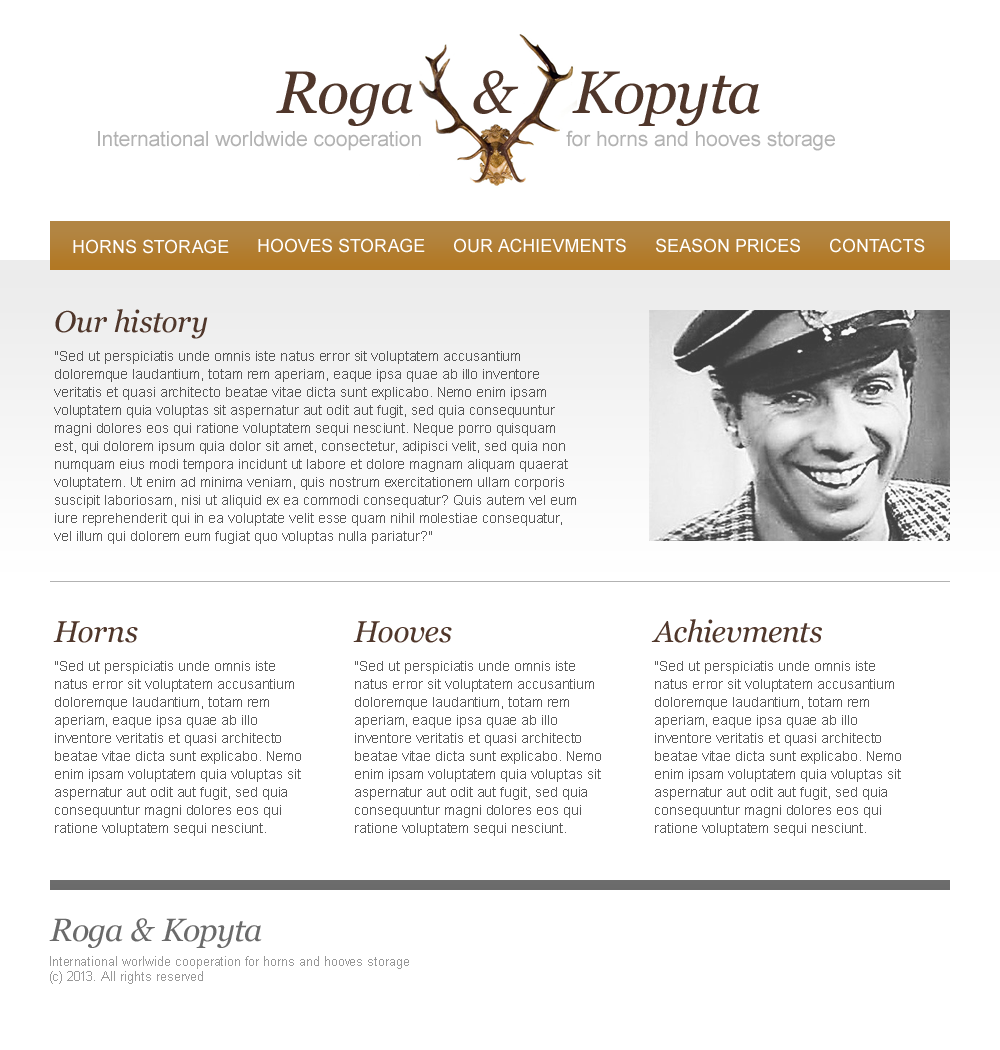
<style>
.page{position:relative;width:1000px;height:1050px;background:#ffffff}
.page>*{position:absolute;margin:0}
.t1{font:60px "Georgia-Italic";color:#50372b}
.t2{font:21px "ArialMT";color:#b2b2b2}
.t3{font:18px "ArialMT";color:#ffffff}
.t4{font:30px "Georgia-Italic";color:#50372b}
.t5{font:14px/18px "ArialMT";color:#565656}
.t6{font:14px/18px "ArialMT";color:#595959}
.t7{font:32px "Georgia-Italic";color:#6a6a6a}
.t8{font:13px/15px "ArialMT";color:#989898}
</style>
<div class="page">
<p class="t1" style="left:276px;top:70px;width:484px;height:56px">Roga    &amp;    Kopyta</p>
<p class="t2" style="left:98px;top:131px;width:323px;height:20px">International worldwide cooperation</p>
<p class="t2" style="left:566px;top:130px;width:269px;height:21px">for horns and hooves storage</p>
<p class="t3" style="left:73px;top:239px;width:156px;height:15px">HORNS STORAGE</p>
<p class="t3" style="left:258px;top:238px;width:167px;height:15px">HOOVES STORAGE</p>
<p class="t3" style="left:454px;top:238px;width:172px;height:15px">OUR ACHIEVMENTS</p>
<p class="t3" style="left:656px;top:238px;width:144px;height:15px">SEASON PRICES</p>
<p class="t3" style="left:830px;top:238px;width:95px;height:15px">CONTACTS</p>
<p class="t4" style="left:55px;top:309px;width:153px;height:30px">Our history</p>
<p class="t5" style="left:54px;top:351px;width:522px;height:193px">"Sed ut perspiciatis unde omnis iste natus error sit voluptatem accusantium <br>doloremque laudantium, totam rem aperiam, eaque ipsa quae ab illo inventore <br>veritatis et quasi architecto beatae vitae dicta sunt explicabo. Nemo enim ipsam <br>voluptatem quia voluptas sit aspernatur aut odit aut fugit, sed quia consequuntur <br>magni dolores eos qui ratione voluptatem sequi nesciunt. Neque porro quisquam <br>est, qui dolorem ipsum quia dolor sit amet, consectetur, adipisci velit, sed quia non <br>numquam eius modi tempora incidunt ut labore et dolore magnam aliquam quaerat <br>voluptatem. Ut enim ad minima veniam, quis nostrum exercitationem ullam corporis <br>suscipit laboriosam, nisi ut aliquid ex ea commodi consequatur? Quis autem vel eum<br>iure reprehenderit qui in ea voluptate velit esse quam nihil molestiae consequatur, <br>vel illum qui dolorem eum fugiat quo voluptas nulla pariatur?"</p>
<p class="t4" style="left:53px;top:621px;width:85px;height:22px">Horns</p>
<p class="t4" style="left:353px;top:621px;width:99px;height:22px">Hooves</p>
<p class="t4" style="left:651px;top:619px;width:171px;height:24px">Achievments</p>
<p class="t6" style="left:55px;top:661px;width:246px;height:175px">"Sed ut perspiciatis unde omnis iste <br>natus error sit voluptatem accusantium <br>doloremque laudantium, totam rem <br>aperiam, eaque ipsa quae ab illo <br>inventore veritatis et quasi architecto <br>beatae vitae dicta sunt explicabo. Nemo <br>enim ipsam voluptatem quia voluptas sit <br>aspernatur aut odit aut fugit, sed quia <br>consequuntur magni dolores eos qui <br>ratione voluptatem sequi nesciunt.</p>
<p class="t6" style="left:355px;top:661px;width:246px;height:175px">"Sed ut perspiciatis unde omnis iste <br>natus error sit voluptatem accusantium <br>doloremque laudantium, totam rem <br>aperiam, eaque ipsa quae ab illo <br>inventore veritatis et quasi architecto <br>beatae vitae dicta sunt explicabo. Nemo <br>enim ipsam voluptatem quia voluptas sit <br>aspernatur aut odit aut fugit, sed quia <br>consequuntur magni dolores eos qui <br>ratione voluptatem sequi nesciunt.</p>
<p class="t6" style="left:655px;top:661px;width:246px;height:175px">"Sed ut perspiciatis unde omnis iste <br>natus error sit voluptatem accusantium <br>doloremque laudantium, totam rem <br>aperiam, eaque ipsa quae ab illo <br>inventore veritatis et quasi architecto <br>beatae vitae dicta sunt explicabo. Nemo <br>enim ipsam voluptatem quia voluptas sit <br>aspernatur aut odit aut fugit, sed quia <br>consequuntur magni dolores eos qui <br>ratione voluptatem sequi nesciunt.</p>
<p class="t7" style="left:49px;top:918px;width:213px;height:30px">Roga &amp; Kopyta</p>
<p class="t8" style="left:50px;top:956px;width:359px;height:28px">International worlwide cooperation for horns and hooves storage<br>(c) 2013. All rights reserved</p>
</div>
